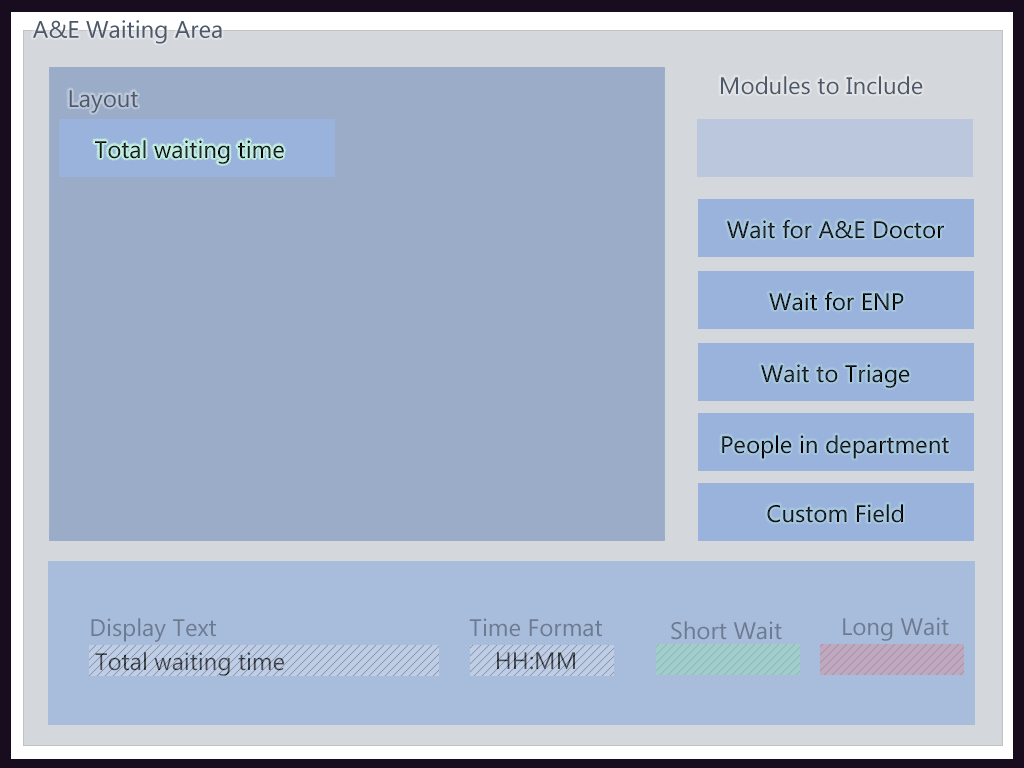
<style>
.page{position:relative;width:1024px;height:768px;background:#9bacc8}
.page>*{position:absolute;margin:0}
.t1{font:24px "MicrosoftNewTaiLue";color:#4d586a}
.t2{font:24px "MicrosoftNewTaiLue"}
.t3{font:24px "MicrosoftNewTaiLue";color:#050607}
.t4{font:24px "MicrosoftNewTaiLue";color:#6d7b92}
.t5{font:24px "MicrosoftNewTaiLue";color:#494c53}
</style>
<div class="page">
<p class="t1" style="left:721px;top:76px;width:202px;height:19px">Modules to Include</p>
<p class="t1" style="left:69px;top:90px;width:69px;height:23px">Layout</p>
<p class="t2" style="left:95px;top:140px;width:189px;height:24px">Total waiting time</p>
<p class="t2" style="left:727px;top:220px;width:217px;height:19px">Wait for A&amp;E Doctor</p>
<p class="t3" style="left:769px;top:292px;width:135px;height:19px">Wait for ENP</p>
<p class="t2" style="left:761px;top:364px;width:149px;height:24px">Wait to Triage</p>
<p class="t2" style="left:722px;top:435px;width:227px;height:24px">People in department</p>
<p class="t2" style="left:767px;top:504px;width:136px;height:19px">Custom Field</p>
<p class="t4" style="left:843px;top:617px;width:106px;height:24px">Long Wait</p>
<p class="t4" style="left:91px;top:618px;width:125px;height:24px">Display Text</p>
<p class="t4" style="left:469px;top:618px;width:133px;height:19px">Time Format</p>
<p class="t4" style="left:671px;top:621px;width:111px;height:19px">Short Wait</p>
<p class="t5" style="left:95px;top:652px;width:189px;height:24px">Total waiting time</p>
<p class="t5" style="left:497px;top:652px;width:78px;height:18px">HH:MM</p>
</div>
